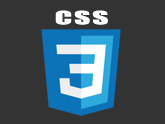
<style>
.page{position:relative;width:165px;height:124px;background:#333333}
.page>*{position:absolute;margin:0}
.t1{font:16.9px "Impact";letter-spacing:-0.06em;color:#ffffff;scale:1.87 1}
</style>
<div class="page">
<p class="t1" style="left:55px;top:10px;width:53px;height:15px">C S S</p>
</div>
